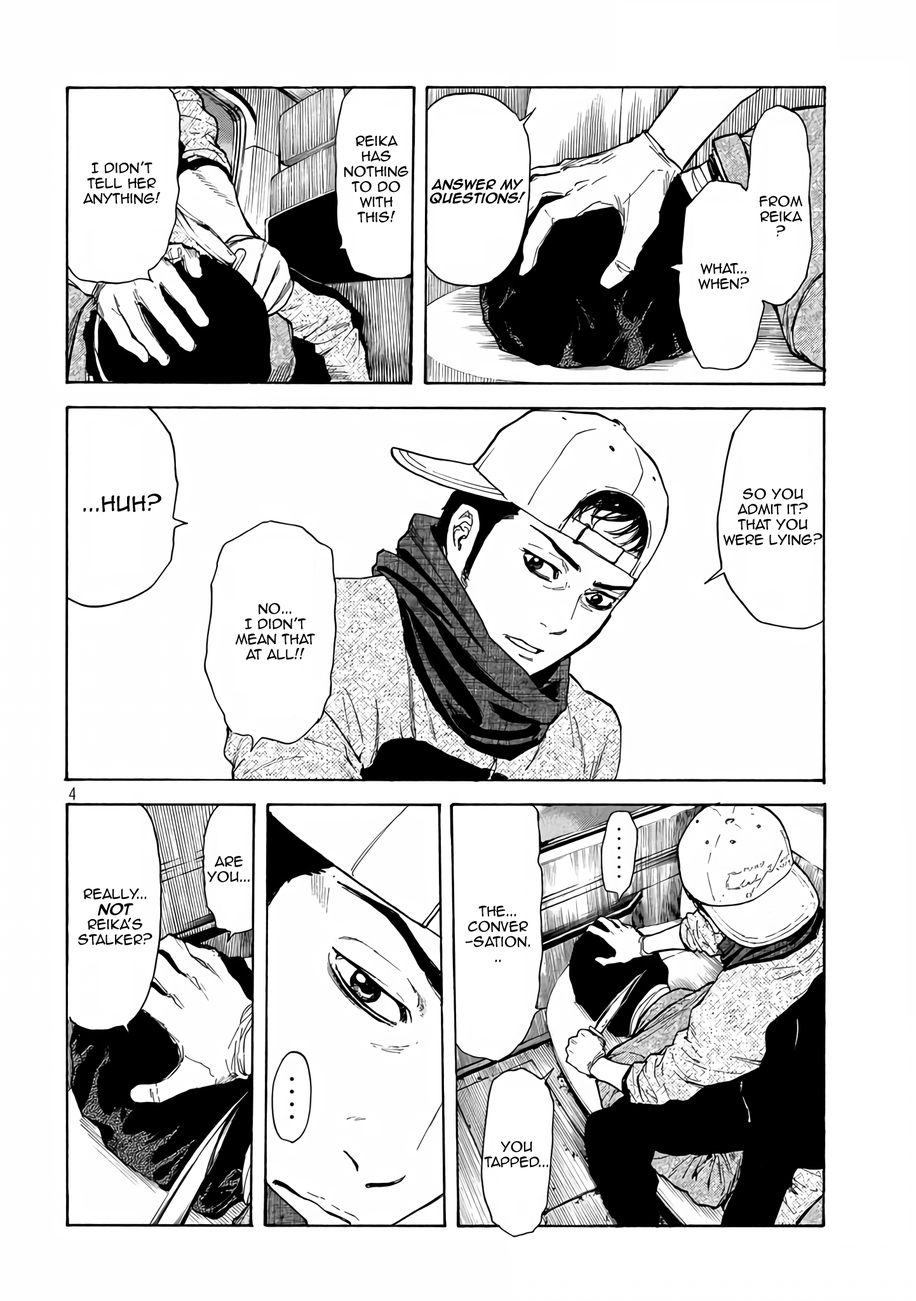
<style>
.page{position:relative;width:916px;height:1301px;background:#ffffff}
.page>*{position:absolute;margin:0}
.t1{font:12.7px "AnimeAce2.0BB";color:#000000}
.t2{font:11.4px "AnimeAce2.0BB-Bold";color:#000000}
.t3{font:19.7px "AnimeAce2.0BB";color:#000000}
.t4{font:12.7px "AnimeAce2.0BB-Bold";color:#000000}
</style>
<div class="page">
<p class="t1" style="left:344px;top:135px;width:65px;height:88px;text-align:center">Reika <br>has nothing to do <br>with this!</p>
<p class="t1" style="left:83px;top:161px;width:78px;height:44px;text-align:center">I didn’t tell her anything!</p>
<p class="t2" style="left:430px;top:179px;width:96px;height:25px;text-align:center">Answer my questions!</p>
<p class="t1" style="left:759px;top:195px;width:44px;height:42px;text-align:center">From Reika?</p>
<p class="t1" style="left:698px;top:263px;width:52px;height:27px;text-align:center">What... When?</p>
<p class="t3" style="left:83px;top:494px;width:78px;height:18px">...Huh?</p>
<p class="t1" style="left:723px;top:488px;width:100px;height:58px;text-align:center">So you <br>admit it?<br>That you were lying?</p>
<p class="t1" style="left:235px;top:603px;width:80px;height:57px;text-align:center">No...<br>I didn’t mean that <br>at all!!</p>
<p class="t1" style="left:207px;top:856px;width:43px;height:27px;text-align:center">Are you...</p>
<p class="t1" style="left:78px;top:888px;width:75px;height:58px;text-align:center">really...<br><span class="t4">not </span>Reika’s stalker?</p>
<p class="t1" style="left:465px;top:905px;width:66px;height:58px;text-align:center">The... conver-sation...</p>
<p class="t1" style="left:484px;top:1141px;width:64px;height:27px;text-align:center">you tapped...</p>
</div>
